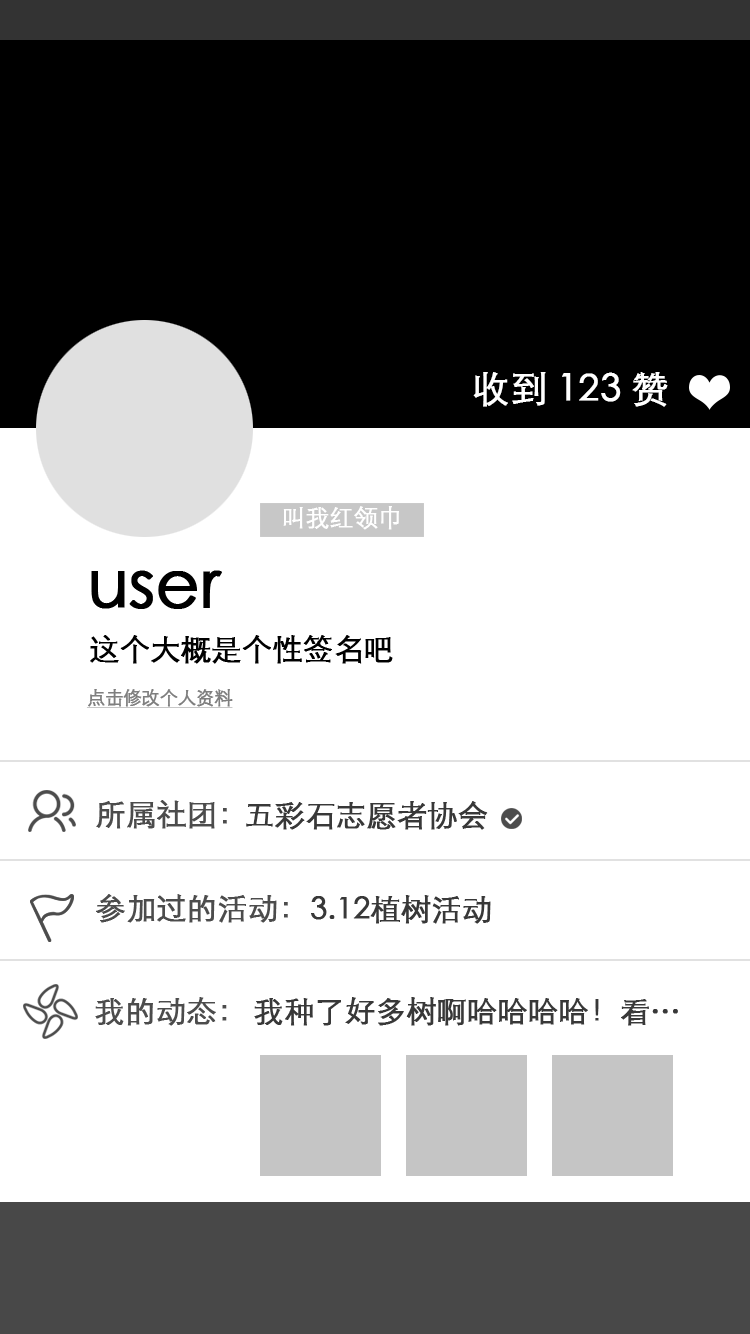
<style>
.page{position:relative;width:750px;height:1334px;background:#ffffff}
.page>*{position:absolute;margin:0}
.t1{font:36.8px "STHeitiSC-Light";letter-spacing:-0.01em;color:#ffffff;font-weight:bold}
.t2{font:23.8px "STHeitiSC-Light";letter-spacing:-0.01em;color:#ffffff;font-weight:bold}
.t3{font:66.7px "STHeitiSC-Light";letter-spacing:-0.01em;color:#000000;font-weight:bold}
.t4{font:30px "STHeitiSC-Light";letter-spacing:-0.01em;color:#000000;font-weight:bold}
.t5{font:17.9px "STHeitiSC-Light";letter-spacing:-0.01em;color:#7f7f7f;font-weight:bold;text-decoration:underline}
.t6{font:30px "STHeitiSC-Light";letter-spacing:-0.01em;color:#4c4c4c;font-weight:bold}
.t7{font:30px "STHeitiSC-Light";letter-spacing:-0.01em;color:#383838;font-weight:bold}
</style>
<div class="page">
<p class="t1" style="left:473px;top:372px;width:195px;height:35px">收到 123 赞</p>
<p class="t2" style="left:283px;top:506px;width:116px;height:24px">叫我红领巾</p>
<p class="t3" style="left:91px;top:570px;width:131px;height:39px">user</p>
<p class="t4" style="left:90px;top:635px;width:303px;height:29px">这个大概是个性签名吧</p>
<p class="t5" style="left:86px;top:689px;width:147px;height:19px">点击修改个人资料</p>
<p class="t6" style="left:96px;top:800px;width:131px;height:29px">所属社团：</p>
<p class="t7" style="left:246px;top:801px;width:242px;height:29px">五彩石志愿者协会</p>
<p class="t6" style="left:96px;top:894px;width:192px;height:29px">参加过的活动：</p>
<p class="t7" style="left:311px;top:895px;width:180px;height:29px">3.12植树活动</p>
<p class="t6" style="left:95px;top:997px;width:132px;height:29px">我的动态：</p>
<p class="t7" style="left:254px;top:997px;width:424px;height:29px">我种了好多树啊哈哈哈哈！看…</p>
</div>
